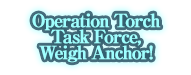
<style>
.page{position:relative;width:191px;height:75px;background:#ffffff}
.page>*{position:absolute;margin:0}
.t1{font:18px/16px "RyuminPro-ExBold";letter-spacing:-0.08em;color:#9fffff;font-weight:bold}
</style>
<div class="page">
<p class="t1" style="left:32px;top:13px;width:129px;height:50px;text-align:center">Operation Torch<br>Task Force,<br>Weigh Anchor!</p>
</div>
